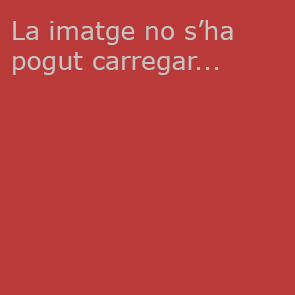
<style>
.page{position:relative;width:295px;height:295px;background:#ba3a3a}
.page>*{position:absolute;margin:0}
.t1{font:25px "Verdana";color:#c5c3c3}
</style>
<div class="page">
<p class="t1" style="left:13px;top:20px;width:220px;height:55px">La imatge no s’ha pogut carregar...</p>
</div>
